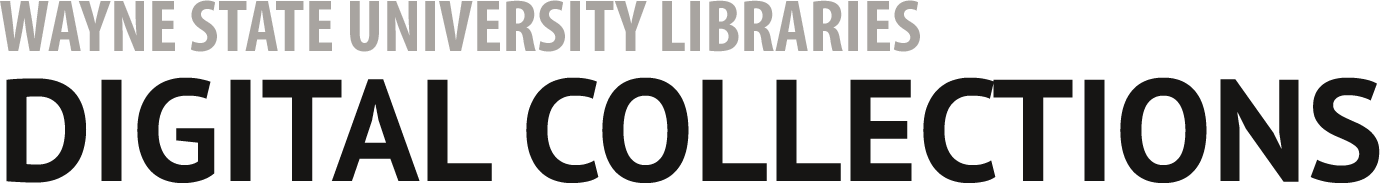
<style>
.page{position:relative;width:1380px;height:183px;background:#ffffff}
.page>*{position:absolute;margin:0}
.t1{font:74.2px "MyriadPro-BoldCond";color:#a8a4a0}
.t2{font:144.4px "PTSans-Bold";color:#161514}
</style>
<div class="page">
<p class="t1" style="left:0px;top:0px;width:920px;height:52px">WAYNE STATE UNIVERSITY LIBRARIES</p>
<p class="t2" style="left:6px;top:77px;width:1374px;height:106px">DIGITAL COLLECTIONS</p>
</div>
